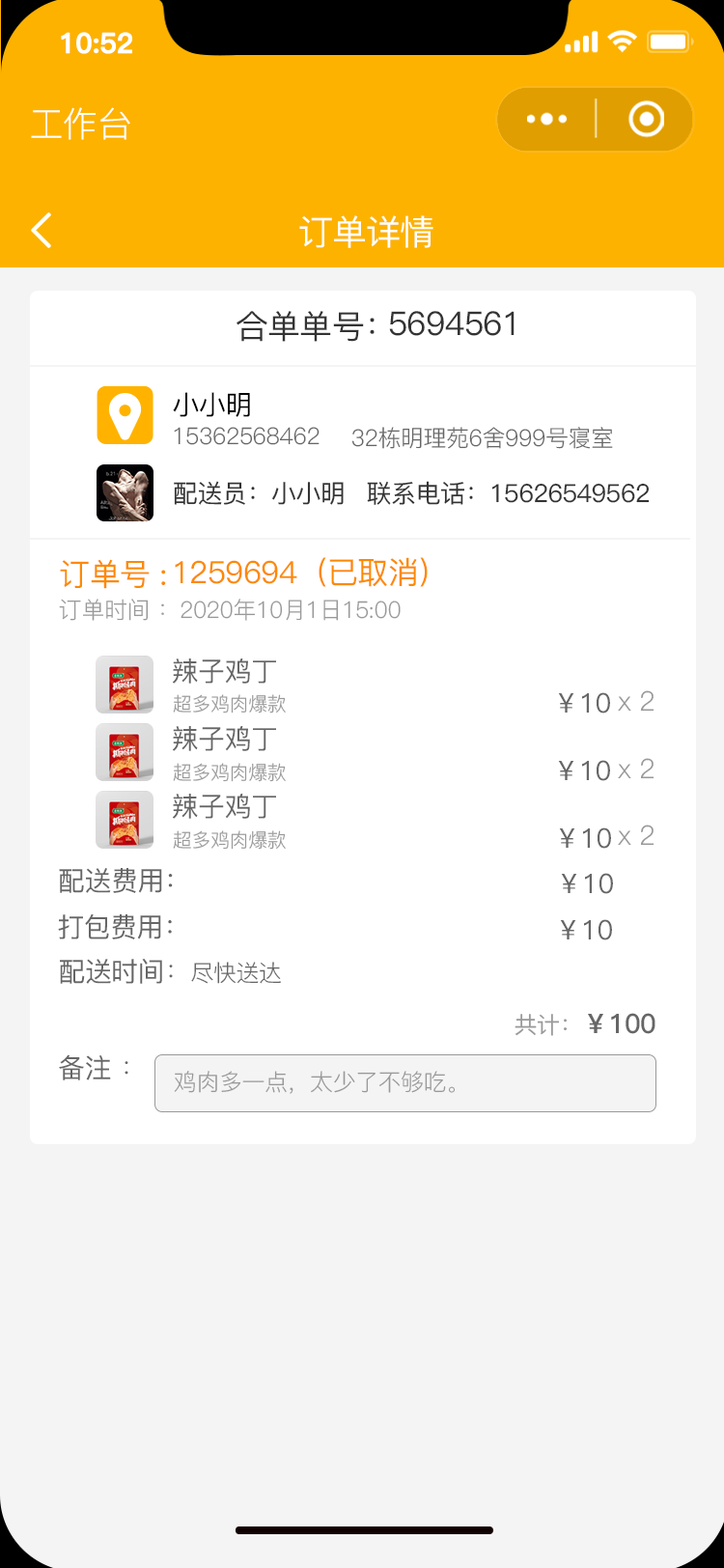
<style>
.page{position:relative;width:724px;height:1568px;background:#ffffff}
.page>*{position:absolute;margin:0}
.t1{font:27.5px "PingFang-SC-Bold";letter-spacing:-0.02em;color:#ffffff;font-weight:bold}
.t2{font:34.8px "PingFang-SC-Regular";letter-spacing:-0.02em;color:#ffffff}
.t3{font:34.8px "PingFang-SC-Medium";letter-spacing:-0.02em;color:#fefefe}
.t4{font:32.8px "PingFang-SC-Medium";letter-spacing:-0.02em;color:#333333}
.t5{font:27px "PingFang-SC-Medium";letter-spacing:-0.02em;color:#000000}
.t6{font:23.2px "PingFang-SC-Regular";letter-spacing:-0.02em;color:#666666}
.t7{font:25.1px "PingFang-SC-Medium";letter-spacing:-0.02em;color:#333333}
.t8{font:30.9px "PingFang-SC-Medium";letter-spacing:-0.02em;color:#fd8900}
.t9{font:23.2px "PingFang-SC-Regular";letter-spacing:-0.02em;color:#999999}
.t10{font:27px "PingFang-SC-Medium";letter-spacing:-0.02em;color:#666666}
.t11{font:19.3px "PingFang-SC-Regular";letter-spacing:-0.02em;color:#999999}
.t12{font:27px "PingFang-SC-Regular";letter-spacing:-0.02em;color:#999999}
.t13{font:27px "PingFang-SC-Regular";letter-spacing:-0.02em;color:#666666}
.t14{font:27px "PingFang-SC-Bold";letter-spacing:-0.02em;color:#666666}
.t15{font:23.2px "PingFang-SC-Medium";letter-spacing:-0.02em;color:#999999}
</style>
<div class="page">
<p class="t1" style="left:61px;top:32px;width:71px;height:22px">10:52</p>
<p class="t2" style="left:31px;top:107px;width:99px;height:33px">工作台</p>
<p class="t3" style="left:299px;top:215px;width:135px;height:33px">订单详情</p>
<p class="t4" style="left:237px;top:311px;width:138px;height:31px">合单单号：</p>
<p class="t4" style="left:389px;top:311px;width:126px;height:25px">5694561</p>
<p class="t5" style="left:173px;top:392px;width:77px;height:25px">小小明</p>
<p class="t6" style="left:174px;top:427px;width:146px;height:18px">15362568462</p>
<p class="t6" style="left:351px;top:427px;width:262px;height:22px">32栋明理苑6舍999号寝室</p>
<p class="t7" style="left:174px;top:481px;width:170px;height:24px">配送员：小小明</p>
<p class="t7" style="left:367px;top:481px;width:283px;height:24px">联系电话：15626549562</p>
<p class="t8" style="left:175px;top:557px;width:253px;height:30px">1259694（已取消）</p>
<p class="t8" style="left:60px;top:559px;width:106px;height:30px">订单号 :</p>
<p class="t9" style="left:59px;top:599px;width:342px;height:22px">订单时间 ：2020年10月1日15:00</p>
<p class="t10" style="left:173px;top:658px;width:103px;height:26px">辣子鸡丁</p>
<p class="t11" style="left:173px;top:694px;width:113px;height:20px">超多鸡肉爆款</p>
<p class="t10" style="left:558px;top:692px;width:52px;height:22px">￥10</p>
<p class="t12" style="left:618px;top:690px;width:37px;height:22px">x 2</p>
<p class="t10" style="left:173px;top:726px;width:103px;height:25px">辣子鸡丁</p>
<p class="t10" style="left:558px;top:760px;width:52px;height:21px">￥10</p>
<p class="t12" style="left:618px;top:758px;width:37px;height:21px">x 2</p>
<p class="t11" style="left:173px;top:763px;width:113px;height:19px">超多鸡肉爆款</p>
<p class="t10" style="left:173px;top:794px;width:103px;height:25px">辣子鸡丁</p>
<p class="t11" style="left:173px;top:830px;width:113px;height:20px">超多鸡肉爆款</p>
<p class="t10" style="left:559px;top:827px;width:52px;height:22px">￥10</p>
<p class="t12" style="left:618px;top:825px;width:37px;height:21px">x 2</p>
<p class="t10" style="left:59px;top:868px;width:114px;height:25px">配送费用：</p>
<p class="t10" style="left:561px;top:873px;width:52px;height:21px">￥10</p>
<p class="t10" style="left:58px;top:914px;width:114px;height:25px">打包费用：</p>
<p class="t10" style="left:560px;top:919px;width:52px;height:21px">￥10</p>
<p class="t10" style="left:60px;top:959px;width:221px;height:25px">配送时间<span class="t13">：</span><span class="t6">尽快送达</span></p>
<p class="t14" style="left:515px;top:1013px;width:141px;height:23px"><span class="t15">共计：</span>￥100</p>
<p class="t10" style="left:59px;top:1054px;width:69px;height:26px">备注 <span class="t13">：</span></p>
<p class="t9" style="left:174px;top:1071px;width:282px;height:23px">鸡肉多一点，太少了不够吃。</p>
</div>
